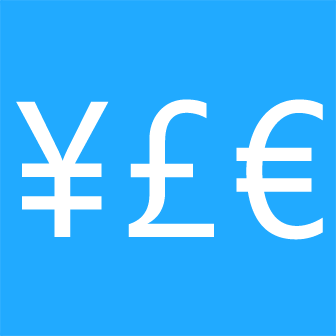
<style>
.page{position:relative;width:336px;height:336px;background:#21aaff}
.page>*{position:absolute;margin:0}
.t1{font:192.6px "SegoeWP";letter-spacing:0.025em;color:#ffffff}
</style>
<div class="page">
<p class="t1" style="left:16px;top:99px;width:307px;height:141px">¥£€</p>
</div>
